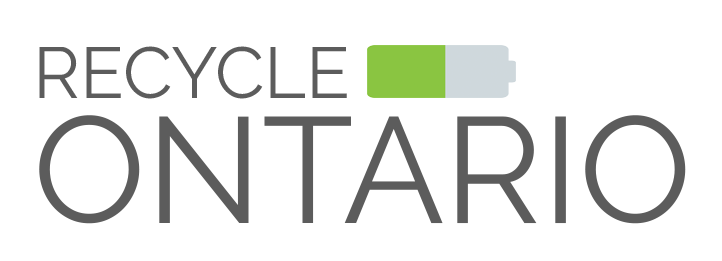
<style>
.page{position:relative;width:722px;height:261px;background:#ffffff}
.page>*{position:absolute;margin:0}
.t1{font:72px "Raleway-Regular";color:#5c5c5c}
.t2{font:150px "Raleway-Regular";color:#5c5c5c}
</style>
<div class="page">
<p class="t1" style="left:39px;top:46px;width:308px;height:53px">RECYCLE</p>
<p class="t2" style="left:39px;top:115px;width:647px;height:109px">ONTARIO</p>
</div>
